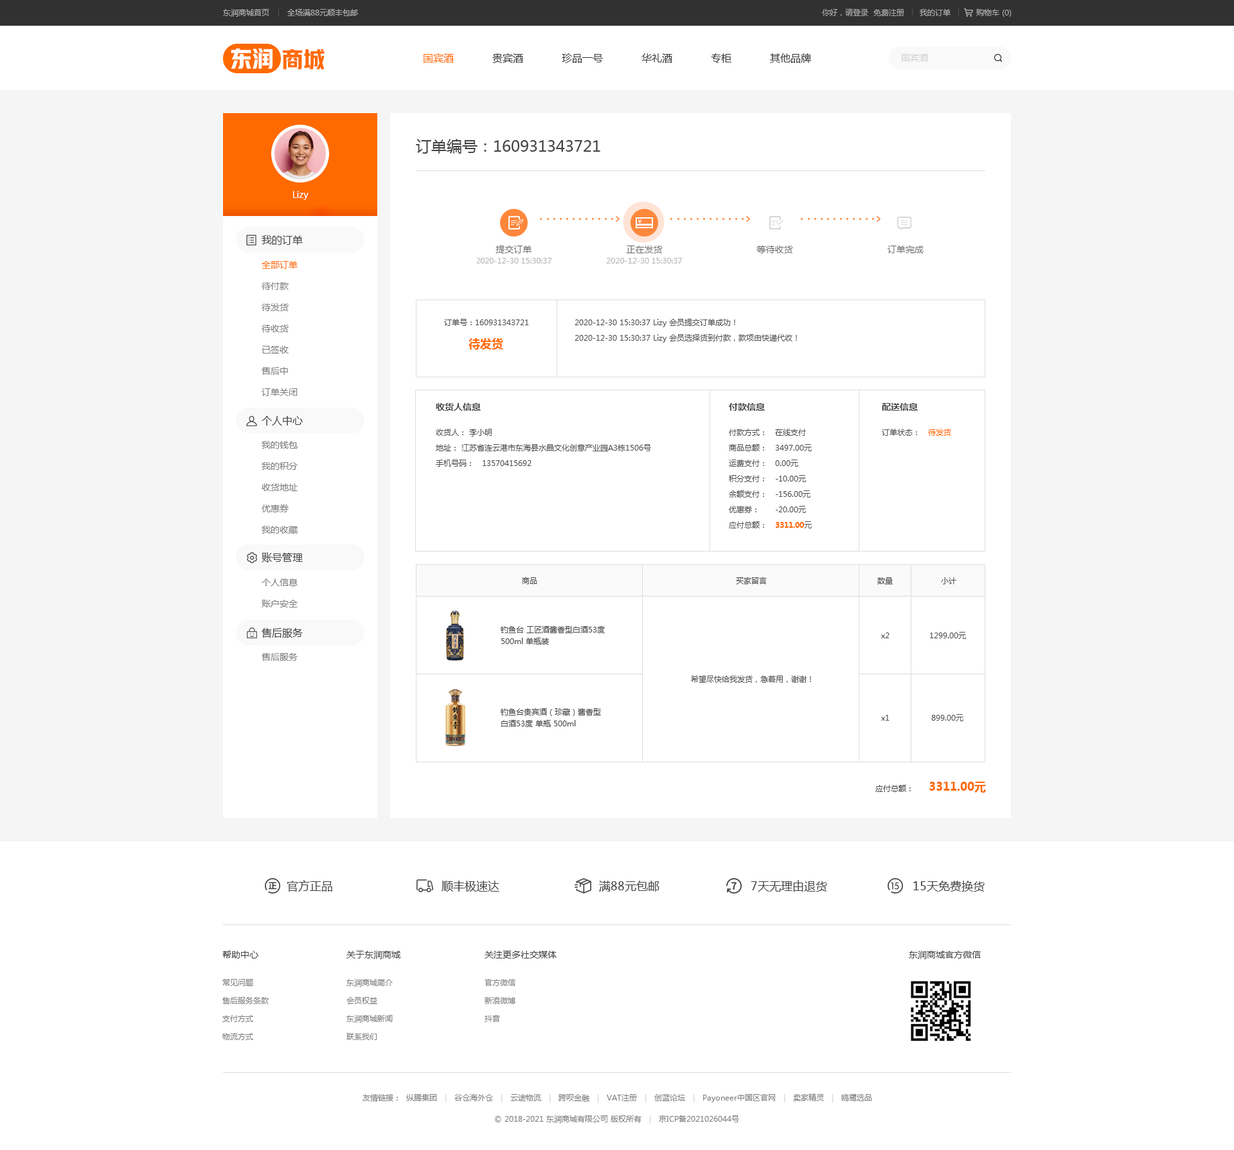
<style>
.page{position:relative;width:1234px;height:1150px;background:#ffffff}
.page>*{position:absolute;margin:0}
.t1{font:7.7px "MicrosoftYaHei";color:#b0b0b0}
.t2{font:7.7px "MicrosoftYaHei";color:#acacac}
.t3{font:21.9px "HYYakuHei-HEW";color:#ffffff}
.t4{font:21.9px "HYYakuHei-HEW";color:#ff6a00}
.t5{font:10.3px "MicrosoftYaHei";color:#333333}
.t6{font:10.3px "MicrosoftYaHei";color:#ff6a00}
.t7{font:9px "MicrosoftYaHei";color:#d2d2d2}
.t8{font:15.4px "MicrosoftYaHei";color:#434343}
.t9{font:9px "MicrosoftYaHei";color:#ffffff}
.t10{font:10.3px "MicrosoftYaHei";color:#434343}
.t11{font:9px/21.2px "MicrosoftYaHei";color:#7d7d7d}
.t12{font:9px/21.2px "MicrosoftYaHei";color:#ff6a00}
.t13{font:7.7px "MicrosoftYaHei";color:#4b4b4b}
.t14{font:7.7px/15.4px "MicrosoftYaHei";color:#4b4b4b}
.t15{font:11.6px "MicrosoftYaHei-Bold";color:#ff6a00}
.t16{font:9px "MicrosoftYaHei-Bold";color:#4b4b4b}
.t17{font:7.7px/15.4px "MicrosoftYaHei-Bold";color:#ff6a00}
.t18{font:7.7px "MicrosoftYaHei";color:#ff6a00}
.t19{font:7.7px/11.6px "MicrosoftYaHei";color:#434343}
.t20{font:9px "MicrosoftYaHei";color:#7d7d7d}
.t21{font:7.7px "MicrosoftYaHei";color:#434343}
.t22{font:11.6px "MicrosoftYaHei";color:#434343}
.t23{font:9px "MicrosoftYaHei";color:#434343}
.t24{font:7.7px/18px "MicrosoftYaHei";color:#7d7d7d}
.t25{font:7.7px "MicrosoftYaHei";color:#7d7d7d}
.t26{font:7.7px "MicrosoftYaHei";color:#d2d2d2}
</style>
<div class="page">
<p class="t1" style="left:223px;top:9px;width:135px;height:8px">东润商城首页       全场满88元顺丰包邮</p>
<p class="t2" style="left:822px;top:8px;width:190px;height:9px">你好，请登录  免费注册      我的订单          购物车 (0)</p>
<p class="t3" style="left:231px;top:48px;width:42px;height:21px">东润</p>
<p class="t4" style="left:282px;top:49px;width:43px;height:20px">商城</p>
<p class="t5" style="left:424px;top:53px;width:387px;height:10px"><span class="t6">国宾酒</span>            贵宾酒            珍品一号            华礼酒            专柜            其他品牌</p>
<p class="t7" style="left:902px;top:54px;width:26px;height:8px">国宾酒</p>
<p class="t8" style="left:416px;top:139px;width:184px;height:15px">订单编号：160931343721</p>
<p class="t9" style="left:293px;top:191px;width:16px;height:9px">Lizy</p>
<p class="t10" style="left:262px;top:235px;width:41px;height:10px">我的订单</p>
<p class="t11" style="left:262px;top:261px;width:36px;height:135px"><span class="t12">全部订单<br></span>待付款<br>待发货<br>待收货<br>已签收<br>售后中<br>订单关闭</p>
<p class="t13" style="left:444px;top:319px;width:85px;height:7px">订单号：160931343721</p>
<p class="t14" style="left:575px;top:319px;width:222px;height:24px">2020-12-30 15:30:37 Lizy 会员提交订单成功！<br>2020-12-30 15:30:37 Lizy 会员选择货到付款，款项由快递代收！</p>
<p class="t15" style="left:469px;top:338px;width:34px;height:12px">待发货</p>
<p class="t16" style="left:436px;top:403px;width:45px;height:8px">收货人信息</p>
<p class="t16" style="left:729px;top:403px;width:36px;height:8px">付款信息</p>
<p class="t16" style="left:882px;top:403px;width:36px;height:8px">配送信息</p>
<p class="t10" style="left:262px;top:416px;width:41px;height:10px">个人中心</p>
<p class="t14" style="left:436px;top:429px;width:215px;height:38px">收货人： 李小明<br>地址： 江苏省连云港市东海县水晶文化创意产业园A3栋1506号<br>手机号码： 13570415692</p>
<p class="t14" style="left:729px;top:429px;width:83px;height:99px">付款方式： 在线支付<br>商品总额： 3497.00元<br>运费支付：   0.00元<br>积分支付： -10.00元<br>余额支付： -156.00元<br>优惠券：      -20.00元<br>应付总额： <span class="t17">3311.00</span>元</p>
<p class="t13" style="left:882px;top:429px;width:69px;height:7px">订单状态： <span class="t18">待发货</span></p>
<p class="t11" style="left:262px;top:441px;width:36px;height:93px">我的钱包<br>我的积分<br>收货地址<br>优惠券<br>我的收藏</p>
<p class="t10" style="left:262px;top:552px;width:41px;height:10px">账号管理</p>
<p class="t11" style="left:262px;top:579px;width:36px;height:29px">个人信息<br>账户安全</p>
<p class="t13" style="left:522px;top:577px;width:15px;height:7px">商品</p>
<p class="t13" style="left:736px;top:577px;width:31px;height:7px">买家留言</p>
<p class="t13" style="left:878px;top:577px;width:15px;height:7px">数量</p>
<p class="t13" style="left:941px;top:577px;width:16px;height:7px">小计</p>
<p class="t10" style="left:262px;top:628px;width:41px;height:10px">售后服务</p>
<p class="t19" style="left:501px;top:626px;width:104px;height:19px">钓鱼台 工匠酒酱香型白酒53度<br>500ml 单瓶装</p>
<p class="t13" style="left:881px;top:633px;width:9px;height:5px">x2</p>
<p class="t13" style="left:930px;top:632px;width:36px;height:7px">1299.00元</p>
<p class="t20" style="left:262px;top:653px;width:36px;height:8px">售后服务</p>
<p class="t13" style="left:691px;top:676px;width:120px;height:7px">希望尽快给我发货，急着用，谢谢！</p>
<p class="t19" style="left:501px;top:708px;width:100px;height:19px">钓鱼台贵宾酒（珍藏）酱香型<br>白酒53度 单瓶 500ml</p>
<p class="t13" style="left:881px;top:715px;width:9px;height:6px">x1</p>
<p class="t13" style="left:932px;top:714px;width:32px;height:7px">899.00元</p>
<p class="t21" style="left:876px;top:785px;width:35px;height:7px">应付总额：</p>
<p class="t15" style="left:930px;top:781px;width:56px;height:12px">3311.00元</p>
<p class="t22" style="left:287px;top:880px;width:45px;height:12px">官方正品</p>
<p class="t22" style="left:442px;top:881px;width:58px;height:11px">顺丰极速达</p>
<p class="t22" style="left:599px;top:881px;width:61px;height:11px">满88元包邮</p>
<p class="t22" style="left:751px;top:880px;width:76px;height:12px">7天无理由退货</p>
<p class="t22" style="left:914px;top:881px;width:71px;height:11px">15天免费换货</p>
<p class="t23" style="left:222px;top:951px;width:36px;height:8px">帮助中心</p>
<p class="t23" style="left:346px;top:951px;width:55px;height:8px">关于东润商城</p>
<p class="t23" style="left:485px;top:951px;width:72px;height:8px">关注更多社交媒体</p>
<p class="t23" style="left:909px;top:951px;width:72px;height:8px">东润商城官方微信</p>
<p class="t24" style="left:222px;top:979px;width:47px;height:61px">常见问题<br>售后服务条款<br>支付方式<br>物流方式</p>
<p class="t24" style="left:346px;top:979px;width:47px;height:61px">东润商城简介<br>会员权益<br>东润商城新闻<br>联系我们</p>
<p class="t24" style="left:485px;top:979px;width:31px;height:43px">官方微信<br>新浪微博<br>抖音</p>
<p class="t25" style="left:363px;top:1094px;width:509px;height:8px">友情链接：  纵腾集团   <span class="t26">|   </span>谷仓海外仓   <span class="t26">|   </span>云途物流   <span class="t26">|   </span>跨呗金融   <span class="t26">|   </span>VAT注册   <span class="t26">|   </span>创蓝论坛   <span class="t26">|   </span>Payoneer中国区官网   <span class="t26">|   </span>卖家精灵   <span class="t26">|   </span>鸥鹭选品</p>
<p class="t25" style="left:495px;top:1115px;width:244px;height:9px">© 2018-2021 东润商城有限公司 版权所有   <span class="t26">|   </span>京ICP备2021026044号</p>
</div>
